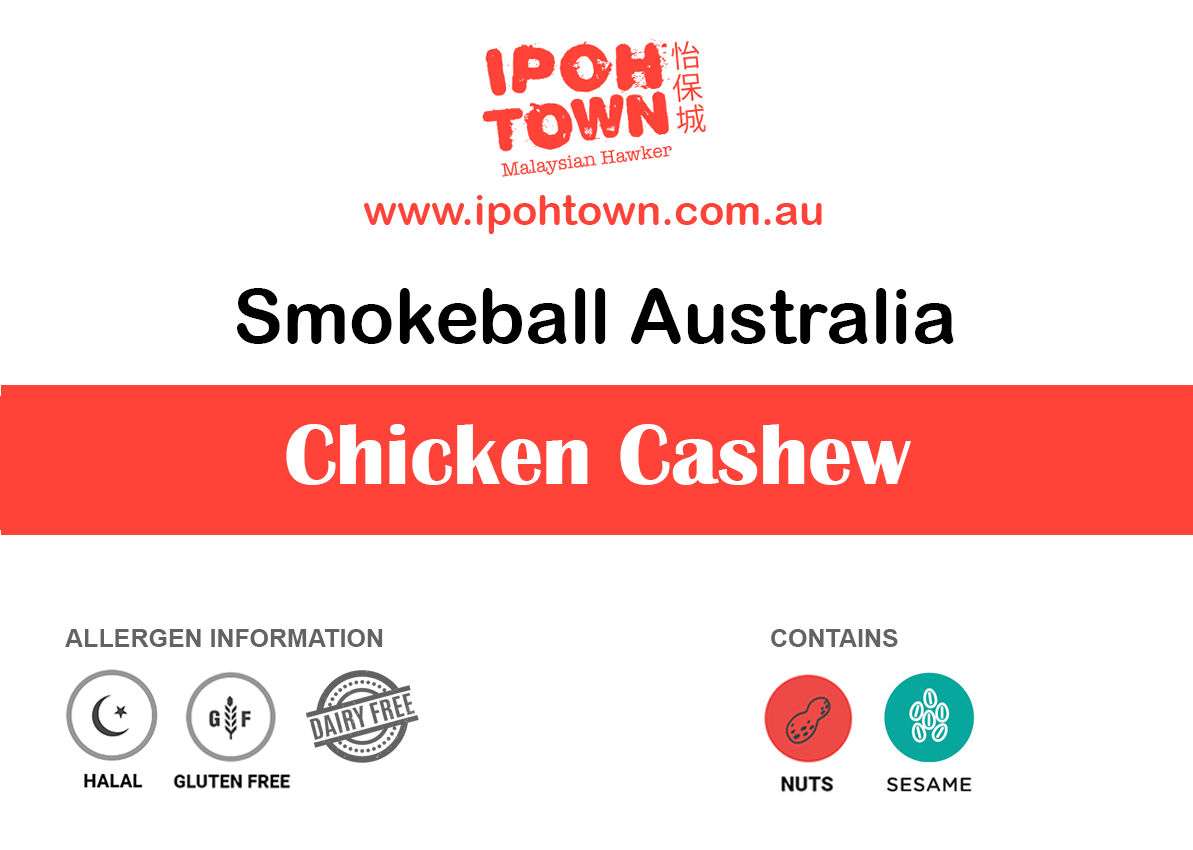
<style>
.page{position:relative;width:1193px;height:850px;background:#ffffff}
.page>*{position:absolute;margin:0}
.t1{font:41.7px "ArialRoundedMTBold";color:#ff4338}
.t2{font:75px "ArialRoundedMTBold";color:#000000}
.t3{font:87.5px "BritannicBold";color:#ffffff}
.t4{font:25px "Arial-BoldMT";color:#636363}
</style>
<div class="page">
<p class="t1" style="left:364px;top:195px;width:458px;height:39px">www.ipohtown.com.au</p>
<p class="t2" style="left:237px;top:288px;width:717px;height:56px">Smokeball Australia</p>
<p class="t3" style="left:286px;top:424px;width:625px;height:61px">Chicken Cashew</p>
<p class="t4" style="left:65px;top:629px;width:318px;height:18px">ALLERGEN INFORMATION</p>
<p class="t4" style="left:771px;top:629px;width:127px;height:18px">CONTAINS</p>
</div>
